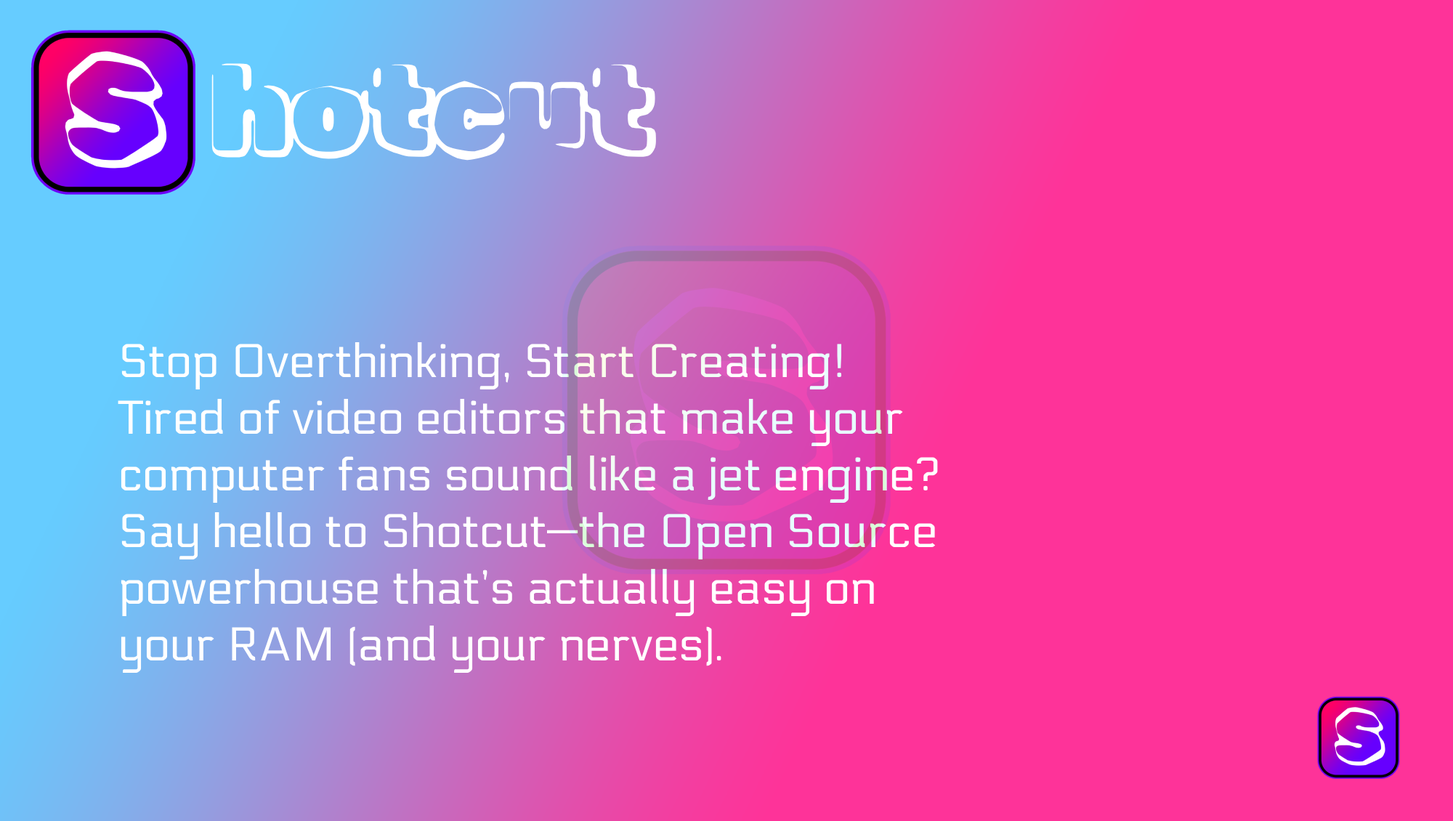
<style>
.page{position:relative;width:1453px;height:821px;background:#fe3399}
.page>*{position:absolute;margin:0}
.t1{font:119.9px "RubikVinyl-Regular";color:#ffffff}
.t2{font:47.2px "Electrolize-Regular";color:#ffffff}
</style>
<div class="page">
<p class="t1" style="left:211px;top:63px;width:445px;height:98px">hotcut</p>
<p class="t2" style="left:118px;top:341px;width:820px;height:332px">Stop Overthinking, Start Creating!<br>Tired of video editors that make your<br>computer fans sound like a jet engine?<br>Say hello to Shotcut—the Open Source<br>powerhouse that’s actually easy on<br>your RAM (and your nerves).</p>
</div>
